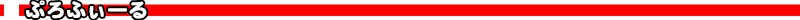
<style>
.page{position:relative;width:800px;height:20px;background:#ff0000}
.page>*{position:absolute;margin:0}
.t1{font:20px "DFMaruGothic-SB-MP-RKSJ-H";color:#ffffff;font-weight:bold}
</style>
<div class="page">
<p class="t1" style="left:26px;top:0px;width:121px;height:19px">ぷろふぃーる</p>
</div>
